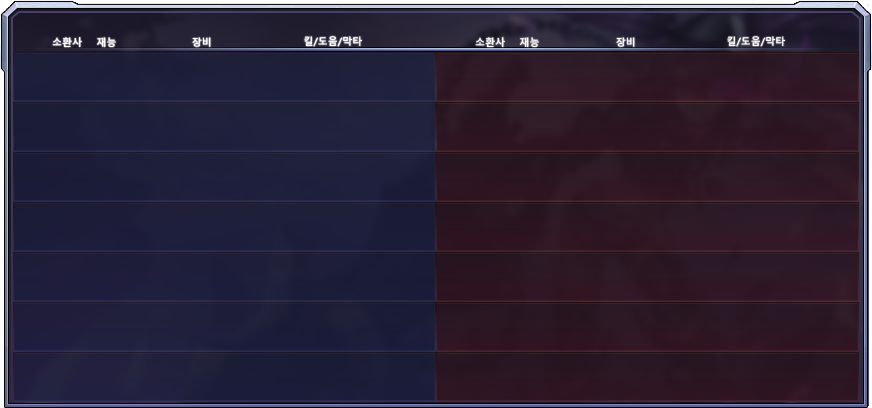
<style>
.page{position:relative;width:872px;height:408px}
.page>*{position:absolute;margin:0}
.t1{font:10px "MalgunGothicBold";color:#ffffff}
</style>
<div class="page">
<p class="t1" style="left:52px;top:37px;width:30px;height:10px">소환사</p>
<p class="t1" style="left:97px;top:37px;width:19px;height:10px">재능</p>
<p class="t1" style="left:192px;top:37px;width:19px;height:10px">장비</p>
<p class="t1" style="left:304px;top:36px;width:58px;height:11px">킬/도움/막타</p>
<p class="t1" style="left:475px;top:37px;width:30px;height:10px">소환사</p>
<p class="t1" style="left:520px;top:37px;width:19px;height:10px">재능</p>
<p class="t1" style="left:616px;top:37px;width:19px;height:10px">장비</p>
<p class="t1" style="left:727px;top:36px;width:58px;height:11px">킬/도움/막타</p>
</div>
